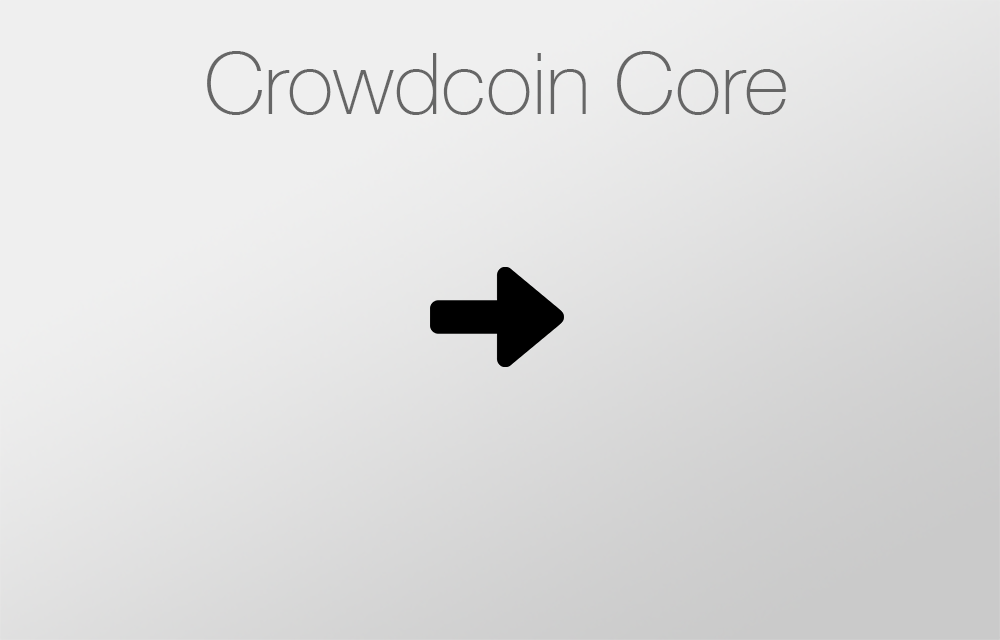
<style>
.page{position:relative;width:1000px;height:640px}
.page>*{position:absolute;margin:0}
.t1{font:85.7px "HelveticaNeue-Thin";color:#666666}
</style>
<div class="page">
<p class="t1" style="left:207px;top:51px;width:579px;height:64px">Crowdcoin Core</p>
</div>
